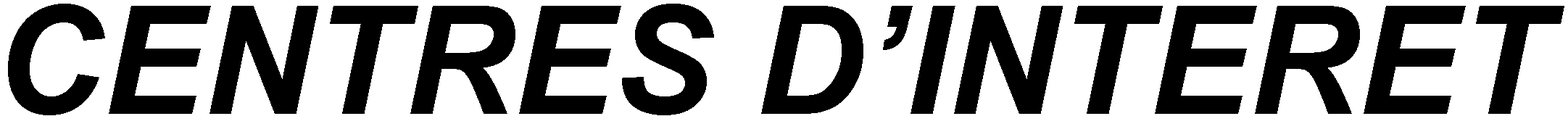
<style>
.page{position:relative;width:1568px;height:116px;background:#ffffff}
.page>*{position:absolute;margin:0}
.t1{font:150.8px "Arial-BoldItalicMT";color:#000000}
</style>
<div class="page">
<p class="t1" style="left:8px;top:4px;width:1556px;height:111px">CENTRES D’INTERET</p>
</div>
